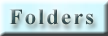
<style>
.page{position:relative;width:108px;height:36px}
.page>*{position:absolute;margin:0}
.t1{font:21.7px "TimesNewRomanPS-BoldMT";letter-spacing:0.1em}
</style>
<div class="page">
<p class="t1" style="left:9px;top:9px;width:85px;height:16px">Folders</p>
</div>
